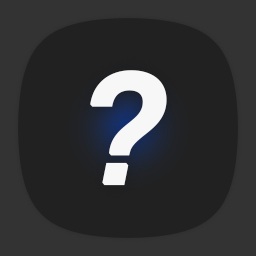
<style>
.page{position:relative;width:256px;height:256px;background:#212121}
.page>*{position:absolute;margin:0}
.t1{font:150px "Mona-Sans-SemiBoldItalic";color:#f7f7f7;font-weight:bold}
</style>
<div class="page">
<p class="t1" style="left:90px;top:70px;width:77px;height:116px">?</p>
</div>
